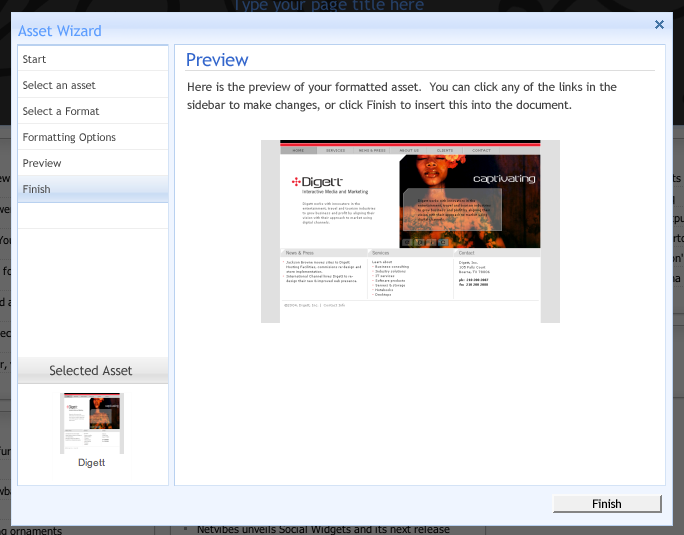
<style>
.page{position:relative;width:684px;height:535px;background:#ffffff}
.page>*{position:absolute;margin:0}
.t1{font:15px "TrebuchetMS";color:#5d9dfe}
.t2{font:18px "TrebuchetMS";color:#3366cc}
.t3{font:11px/26px "TrebuchetMS";color:#444444}
.t4{font:12px/18px "TrebuchetMS";color:#444444}
.t5{font:13px "TrebuchetMS";color:#444444}
</style>
<div class="page">
<p class="t1" style="left:18px;top:25px;width:83px;height:12px">Asset Wizard</p>
<p class="t2" style="left:187px;top:53px;width:62px;height:14px">Preview</p>
<p class="t3" style="left:23px;top:55px;width:93px;height:138px">Start<br>Select an asset<br>Select a Format<br>Formatting Options<br>Preview<br>Finish</p>
<p class="t4" style="left:187px;top:82px;width:430px;height:30px">Here is the preview of your formatted asset.  You can click any of the links in the<br>sidebar to make changes, or click Finish to insert this into the document.</p>
<p class="t5" style="left:50px;top:365px;width:83px;height:11px">Selected Asset</p>
</div>
